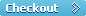
<style>
.page{position:relative;width:86px;height:16px}
.page>*{position:absolute;margin:0}
.t1{font:11px "Tahoma-Bold";color:#fefefe}
</style>
<div class="page">
<p class="t1" style="left:6px;top:3px;width:52px;height:9px">Checkout</p>
</div>
